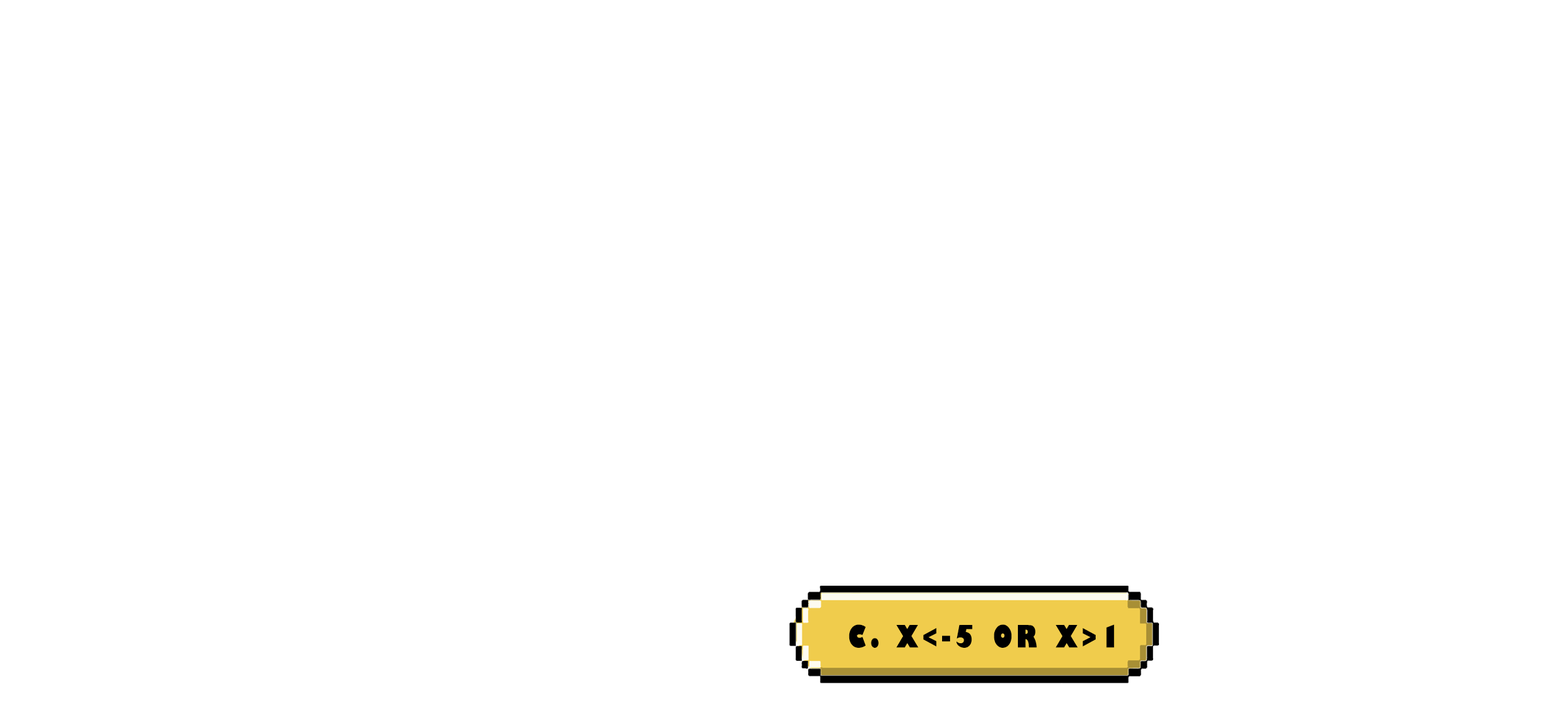
<style>
.page{position:relative;width:1568px;height:706px;background:#ffffff}
.page>*{position:absolute;margin:0}
.t1{font:29.9px "GillSans-UltraBoldCondensed";letter-spacing:0.115em;color:#000000;text-transform:uppercase;scale:1.12 1}
</style>
<div class="page">
<p class="t1" style="left:849px;top:624px;width:266px;height:23px">c. x&lt;-5 or x&gt;1</p>
</div>
